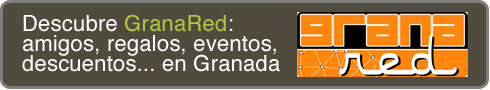
<style>
.page{position:relative;width:490px;height:90px;background:#514b3e}
.page>*{position:absolute;margin:0}
.t1{font:22px/20px "Helvetica";letter-spacing:0.01em;color:#ffffff}
.t2{font:22px/20px "Helvetica";letter-spacing:0.01em;color:#acc83e}
</style>
<div class="page">
<p class="t1" style="left:22px;top:14px;width:258px;height:58px">Descubre <span class="t2">GranaRed</span>:<br>amigos, regalos, eventos,<br>descuentos... en Granada</p>
</div>
